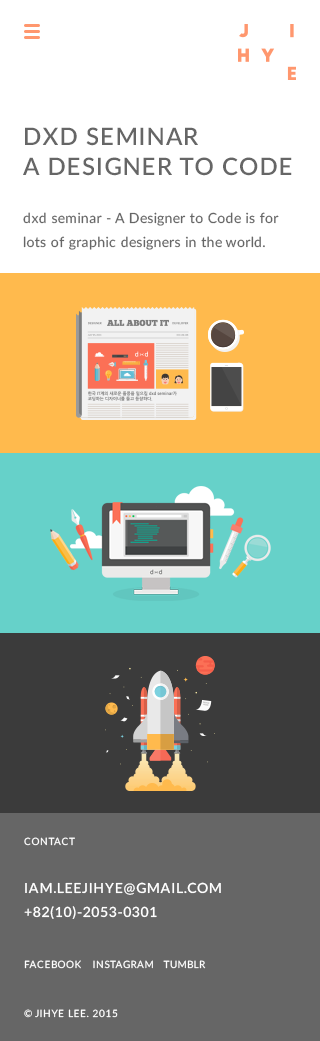
<style>
.page{position:relative;width:320px;height:1041px;background:#ffffff}
.page>*{position:absolute;margin:0}
.t1{font:14px/24px "Lato-Regular";letter-spacing:0.025em;color:#666666}
.t2{font:24px/30px "Lato-Semibold";letter-spacing:0.05em;color:#666666}
.t3{font:14px/24px "Lato-Semibold";letter-spacing:0.05em;color:#ffffff}
.t4{font:10px/24px "Lato-Regular";letter-spacing:0.05em;color:#ffffff}
.t5{font:10px "Lato-Regular";letter-spacing:0.05em;color:#ffffff}
</style>
<div class="page">
<p class="t1" style="left:23px;top:127px;width:269px;height:123px"><span class="t2">DXD SEMINAR<br>A DESIGNER TO CODE<br><br></span>dxd seminar - A Designer to Code is for<br>lots of graphic designers in the world.</p>
<p class="t3" style="left:24px;top:837px;width:197px;height:82px"><span class="t4">CONTACT<br><br></span>IAM.LEEJIHYE@GMAIL.COM<br>+82(10)-2053-0301</p>
<p class="t5" style="left:24px;top:960px;width:182px;height:9px">FACEBOOK   INSTAGRAM   TUMBLR</p>
<p class="t5" style="left:24px;top:1009px;width:94px;height:9px">© JIHYE LEE. 2015</p>
</div>
